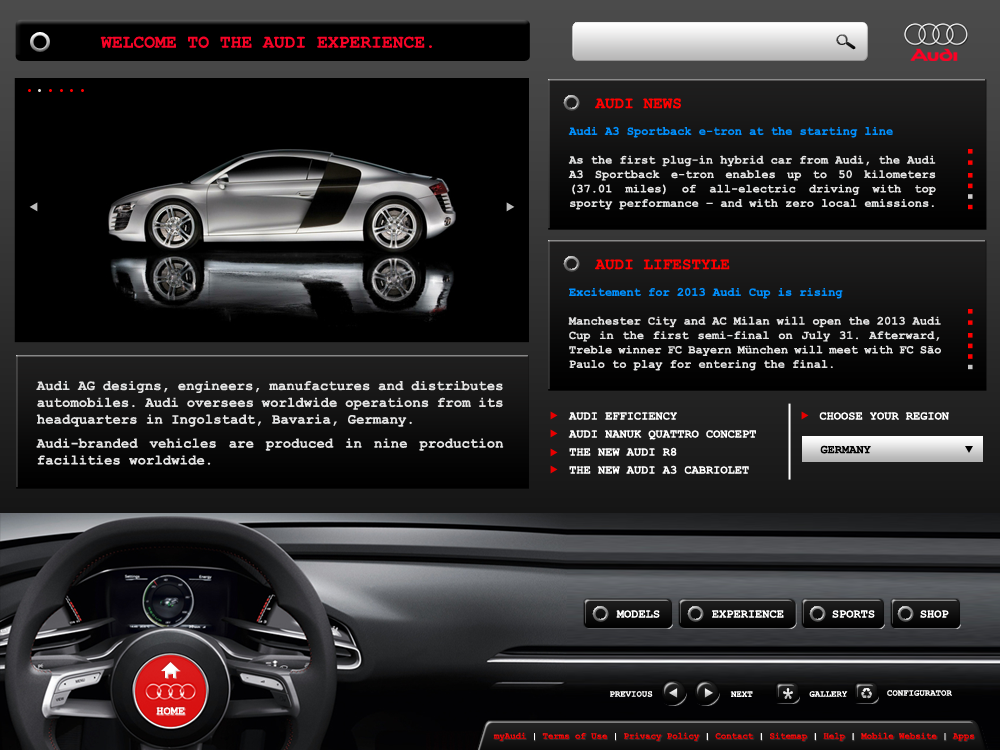
<style>
.page{position:relative;width:1000px;height:750px}
.page>*{position:absolute;margin:0}
.t1{font:16px "CourierNewPS-BoldMT";color:#ff0000}
.t2{font:12px "CourierNewPS-BoldMT";color:#e3e3e3}
.t3{font:12px "CourierNewPS-BoldMT";color:#0090ff}
.t4{font:14px "CourierNewPS-BoldMT";color:#e3e3e3}
.t5{font:14px/24px "CourierNewPS-BoldMT";color:#e3e3e3}
.t6{font:12px/18px "CourierNewPS-BoldMT";color:#ffffff}
.t7{font:12px "CourierNewPS-BoldMT";color:#ffffff}
.t8{font:12px "CourierNewPS-BoldMT";color:#000000}
.t9{font:9px "CourierNewPS-BoldMT";color:#ffffff}
.t10{font:9px "CourierNewPS-BoldMT";color:#f20000}
.t11{font:9px "CourierNewPS-BoldMT";color:#fefefe}
</style>
<div class="page">
<p class="t1" style="left:595px;top:98px;width:86px;height:11px">AUDI NEWS</p>
<p class="t2" style="left:568px;top:126px;width:368px;height:84px;text-align:justify"><span class="t3">Audi A3 Sportback e-tron at the starting line<br></span><br>As the first plug-in hybrid car from Audi, the Audi A3 Sportback e-tron enables up to 50 kilometers (37.01 miles) of all-electric driving with top sporty performance – and with zero local emissions.</p>
<p class="t1" style="left:595px;top:259px;width:135px;height:11px">AUDI LIFESTYLE</p>
<p class="t2" style="left:568px;top:287px;width:373px;height:84px;text-align:justify"><span class="t3">Excitement for 2013 Audi Cup is rising<br><br></span>Manchester City and AC Milan will open the 2013 Audi Cup in the first semi-final on July 31. Afterward, Treble winner FC Bayern München will meet with FC São Paulo to play for entering the final.</p>
<p class="t4" style="left:36px;top:381px;width:468px;height:84px;text-align:justify">Audi AG designs, engineers, manufactures and distributes automobiles. Audi oversees worldwide operations from its headquarters in Ingolstadt, Bavaria, Germany. <br><span class="t5">Audi-branded vehicles are produced in nine production</span> facilities worldwide.</p>
<p class="t6" style="left:568px;top:412px;width:188px;height:62px;text-align:justify">AUDI EFFICIENCY<br>AUDI NANUK QUATTRO CONCEPT<br>THE NEW AUDI R8<br>THE NEW AUDI A3 CABRIOLET</p>
<p class="t7" style="left:819px;top:412px;width:130px;height:8px">CHOOSE YOUR REGION</p>
<p class="t8" style="left:820px;top:445px;width:51px;height:9px">GERMANY</p>
<p class="t7" style="left:616px;top:610px;width:44px;height:8px">MODELS</p>
<p class="t7" style="left:712px;top:610px;width:72px;height:8px">EXPERIENCE</p>
<p class="t7" style="left:832px;top:610px;width:43px;height:8px">SPORTS</p>
<p class="t7" style="left:920px;top:610px;width:29px;height:8px">SHOP</p>
<p class="t9" style="left:610px;top:691px;width:43px;height:6px">PREVIOUS</p>
<p class="t9" style="left:730px;top:691px;width:23px;height:6px">NEXT</p>
<p class="t9" style="left:809px;top:691px;width:39px;height:6px">GALLERY</p>
<p class="t9" style="left:887px;top:690px;width:65px;height:6px">CONFIGURATOR</p>
<p class="t7" style="left:156px;top:707px;width:29px;height:8px">HOME</p>
<p class="t10" style="left:493px;top:732px;width:482px;height:9px">myAudi<span class="t9"> |</span> Terms of Use <span class="t9">|</span> Privacy Policy <span class="t9">|</span> Contact <span class="t9">|</span> Sitemap <span class="t9">|</span> Help <span class="t9">|</span> Mobile Website <span class="t11">|</span> Apps</p>
</div>
